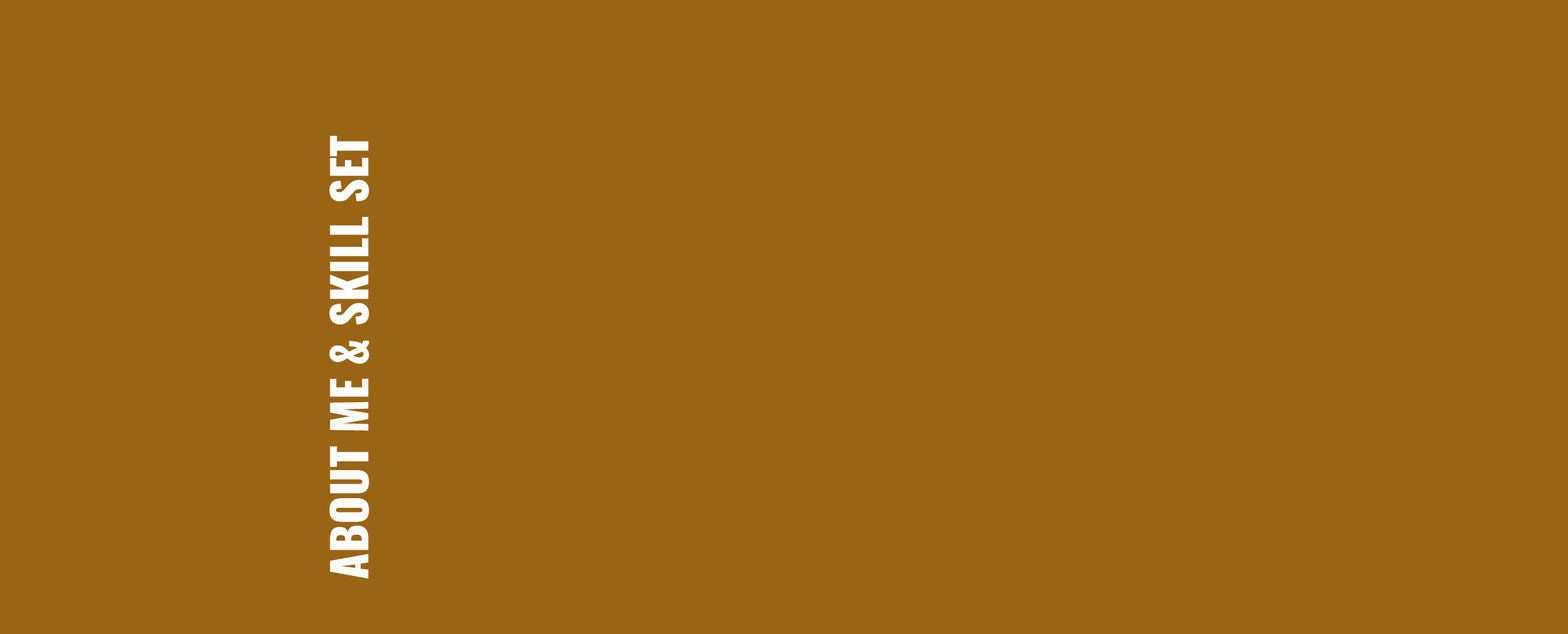
<style>
.page{position:relative;width:1568px;height:634px;background:#996515}
.page>*{position:absolute;margin:0}
.t1{font:47.2px "Oswald-Heavy";color:#ffffff}
</style>
<div class="page">
<p class="t1" style="left:329px;top:136px;width:40px;height:444px;rotate:-90deg">ABOUT ME &amp; SKILL SET</p>
</div>
